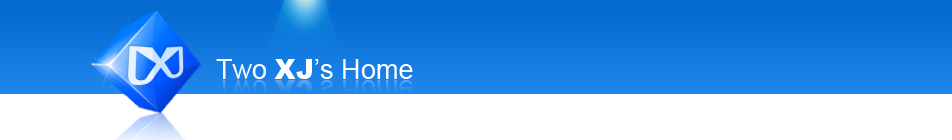
<style>
.page{position:relative;width:952px;height:140px;background:#ffffff}
.page>*{position:absolute;margin:0}
.t1{font:27.2px "ArialMT";color:#ffffff}
.t2{font:27.2px "Arial-Black";color:#ffffff}
</style>
<div class="page">
<p class="t1" style="left:216px;top:59px;width:197px;height:20px">Two <span class="t2">XJ</span>’s Home</p>
</div>
